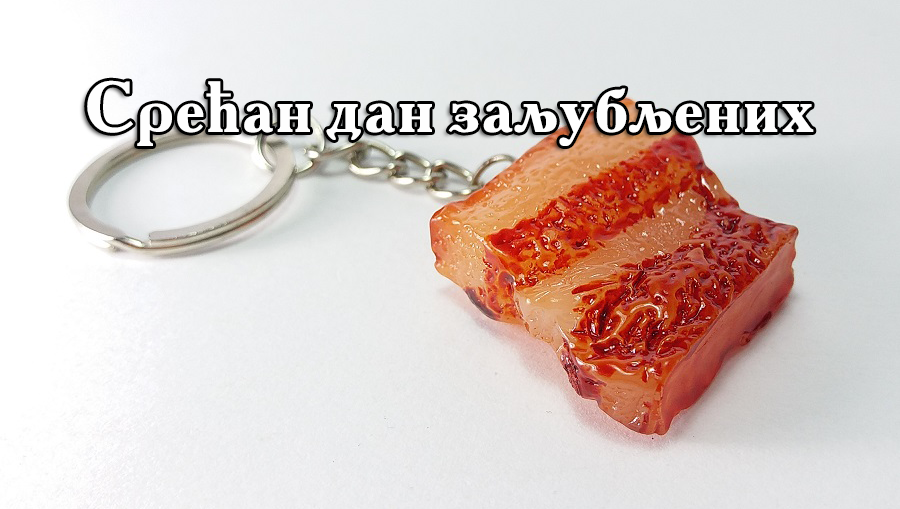
<style>
.page{position:relative;width:900px;height:509px}
.page>*{position:absolute;margin:0}
.t1{font:72px "AkademieAlte";color:#fefefe}
</style>
<div class="page">
<p class="t1" style="left:87px;top:80px;width:727px;height:66px">Срећан дан заљубљених</p>
</div>
